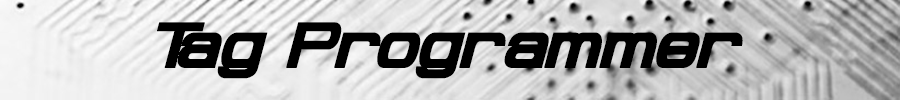
<style>
.page{position:relative;width:900px;height:100px}
.page>*{position:absolute;margin:0}
.t1{font:60px "ProbertBlack-Italic";color:#000000;font-weight:bold}
</style>
<div class="page">
<p class="t1" style="left:157px;top:22px;width:586px;height:57px">Tag Programmer</p>
</div>
